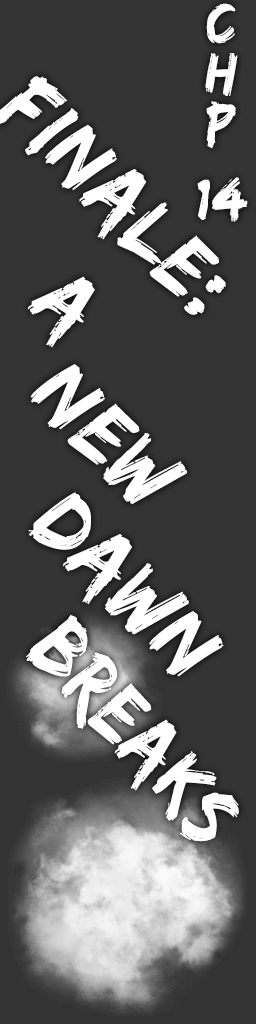
<style>
.page{position:relative;width:256px;height:1024px;background:#333333}
.page>*{position:absolute;margin:0}
.t1{font:60px/25.1px "EdoSZ";letter-spacing:0.03em;color:#ffffff}
.t2{font:90.5px "EdoSZ";letter-spacing:0.03em;color:#ffffff;scale:0.95 1}
.t3{font:91.3px "EdoSZ";letter-spacing:0.03em;color:#ffffff;scale:0.96 1}
.t4{font:88.6px "EdoSZ";letter-spacing:0.03em;color:#ffffff;scale:0.9 1}
</style>
<div class="page">
<p class="t1" style="left:197px;top:3px;width:51px;height:219px;text-align:center">C<br><br>H<br><br>P<br><br><br>14</p>
<p class="t2" style="left:28px;top:276px;width:67px;height:72px;rotate:46deg">A</p>
<p class="t3" style="left:30px;top:364px;width:157px;height:140px;rotate:45deg">New</p>
<p class="t3" style="left:28px;top:492px;width:196px;height:185px;rotate:45deg">Dawn</p>
<p class="t4" style="left:26px;top:614px;width:213px;height:228px;rotate:48deg">Breaks</p>
</div>
